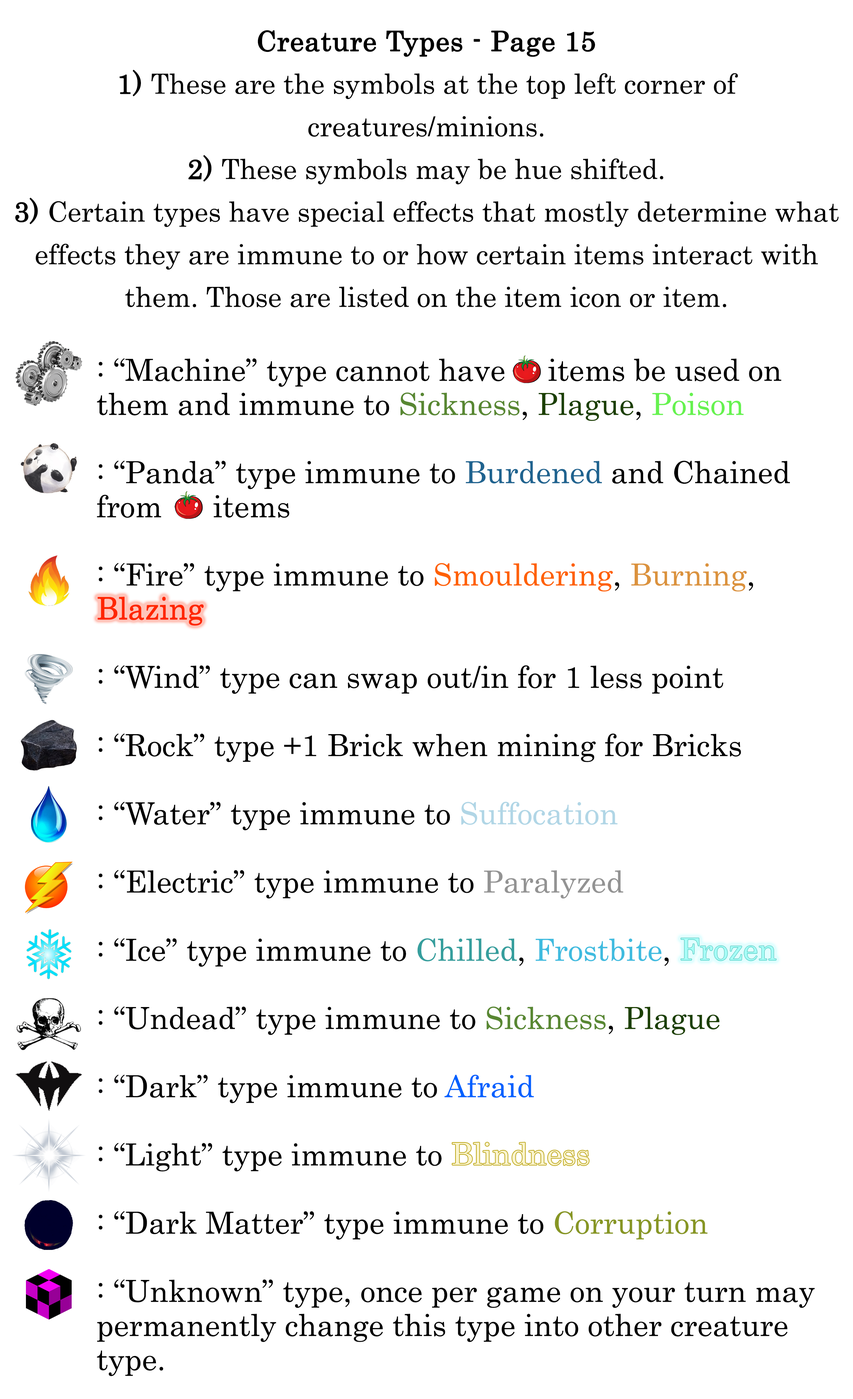
<style>
.page{position:relative;width:853px;height:1399px;background:#ffffff}
.page>*{position:absolute;margin:0}
.t1{font:47.4px/42.6px "Century";color:#000000}
.t2{font:47.4px/42.6px "Century";color:#000000;font-weight:bold}
.t3{font:52.1px/34.1px "Century";color:#000000}
.t4{font:52.1px/34.1px "Century";color:#588732}
.t5{font:52.1px/34.1px "Century";color:#1b3f00}
.t6{font:52.1px/34.1px "Century";color:#66f24f}
.t7{font:52.1px/34.1px "Century";color:#1f638f}
.t8{font:52.1px/34.1px "Century";color:#ff6000}
.t9{font:52.1px/34.1px "Century";color:#db923d}
.t10{font:52.1px/34.1px "Century";color:#ff2600}
.t11{font:52.1px/34.1px "Century";color:#b1d6e6}
.t12{font:52.1px/34.1px "Century";color:#939393}
.t13{font:52.1px/34.1px "Century";color:#359e9d}
.t14{font:52.1px/34.1px "Century";color:#3fbbdf}
.t15{font:52.1px/34.1px "Century";color:#9afff4}
.t16{font:52.1px/34.1px "Century";color:#0060ff}
.t17{font:52.1px/34.1px "Century";color:#f9f2c2}
.t18{font:52.1px/34.1px "Century";color:#879624}
.t19{font:52.1px "Century";color:#ff2600}
.t20{font:52.1px "Century";color:#a7fdf7}
</style>
<div class="page">
<p class="t1" style="left:15px;top:30px;width:823px;height:277px;text-align:center"><span class="t2">Creature Types - Page 15<br>1)</span> These are the symbols at the top left corner of creatures/minions.<br><span class="t2">2)</span> These symbols may be hue shifted.<br><span class="t2">3)</span> Certain types have special effects that mostly determine what effects they are immune to or how certain items interact with them. Those are listed on the item icon or item.</p>
<p class="t3" style="left:97px;top:358px;width:717px;height:1018px">: “Machine” type cannot have     items be used on them and immune to <span class="t4">Sickness</span>, <span class="t5">Plague</span>, <span class="t6">Poison<br></span><br>: “Panda” type immune to <span class="t7">Burdened</span> and Chained from      items<br><br>: “Fire” type immune to <span class="t8">Smouldering</span>, <span class="t9">Burning</span>, <span class="t10">Blazing<br></span><br>: “Wind” type can swap out/in for 1 less point<br><br>: “Rock” type +1 Brick when mining for Bricks<br><br>: “Water” type immune to <span class="t11">Suffocation<br><br></span>: “Electric” type immune to <span class="t12">Paralyzed<br></span><br>: “Ice” type immune to <span class="t13">Chilled</span>, <span class="t14">Frostbite</span>, <span class="t15">Frozen<br></span><br>: “Undead” type immune to <span class="t4">Sickness</span>, <span class="t5">Plague<br></span><br>: “Dark” type immune to <span class="t16">Afraid<br></span><br>: “Light” type immune to <span class="t17">Blindness<br></span><br>: “Dark Matter” type immune to <span class="t18">Corruption<br></span><br>: “Unknown” type, once per game on your turn may permanently change this type into other creature type.</p>
<p class="t19" style="left:98px;top:596px;width:106px;height:29px">Blazing</p>
<p class="t20" style="left:680px;top:938px;width:96px;height:22px">Frozen</p>
</div>
